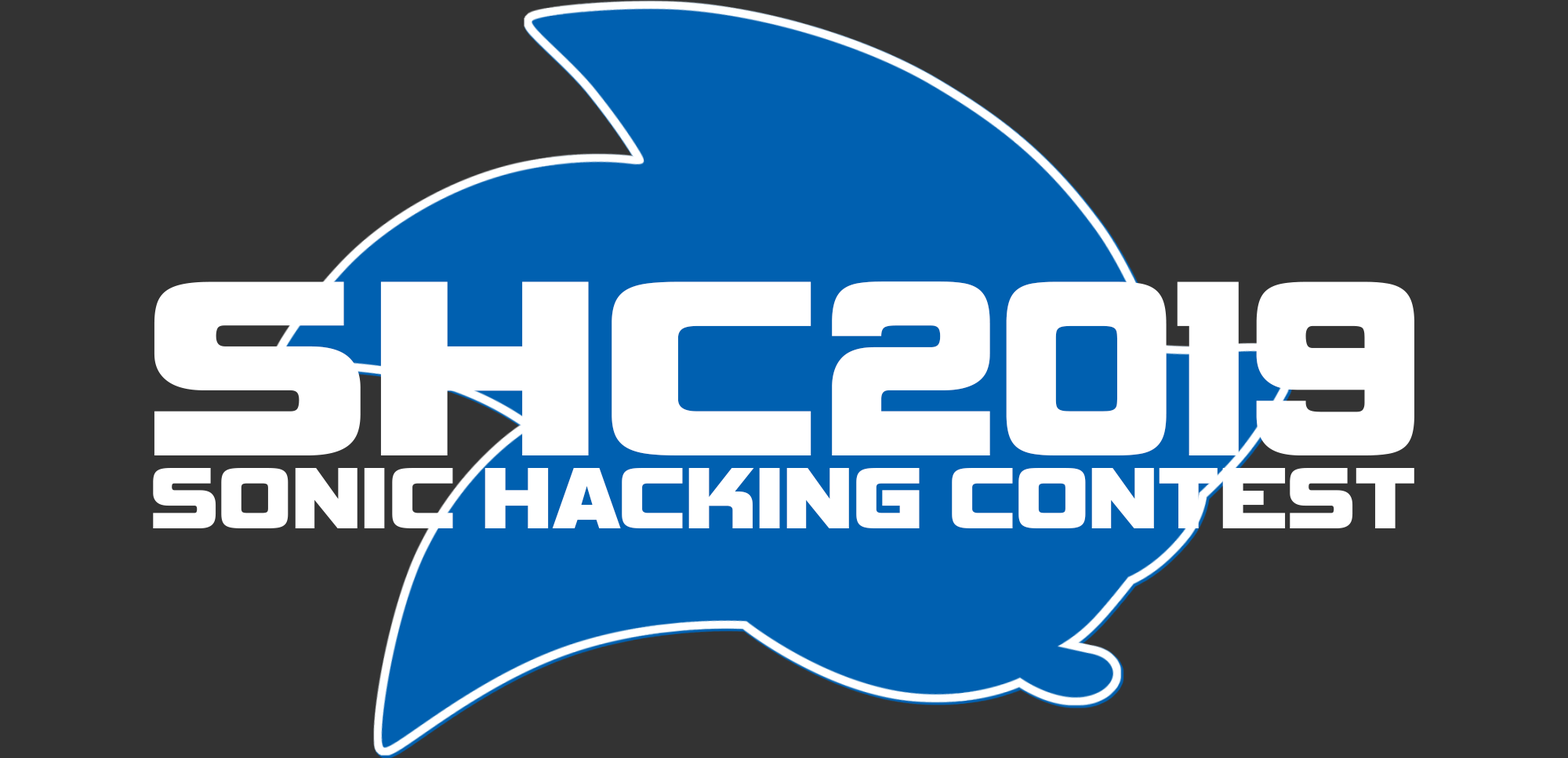
<style>
.page{position:relative;width:1568px;height:758px;background:#333333}
.page>*{position:absolute;margin:0}
.t1{font:263px "Vipnagorgialla-Regular";color:#ffffff}
.t2{font:263px "Vipnagorgialla-Regular";color:#ffffff;scale:0.74 1}
.t3{font:90.7px "Vipnagorgialla-Regular";color:#ffffff;scale:0.87 1}
</style>
<div class="page">
<p class="t1" style="left:154px;top:281px;width:657px;height:175px">SHC</p>
<p class="t2" style="left:832px;top:281px;width:582px;height:175px">2019</p>
<p class="t3" style="left:153px;top:468px;width:1261px;height:60px">SONIC HACKING CONTEST</p>
</div>
